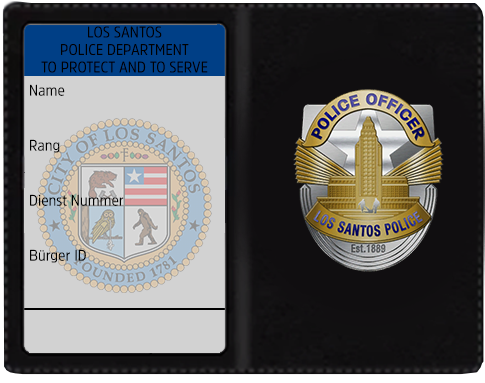
<style>
.page{position:relative;width:485px;height:383px}
.page>*{position:absolute;margin:0}
.t1{font:15.6px/17.4px "AmsiProNarw-Regular";color:#000000}
.t2{font:15.6px/55px "AmsiProNarw-Regular";color:#000000}
</style>
<div class="page">
<p class="t1" style="left:41px;top:26px;width:167px;height:47px;text-align:center">LOS SANTOS<br>POLICE DEPARTMENT<br>TO PROTECT AND TO SERVE</p>
<p class="t2" style="left:30px;top:84px;width:94px;height:179px">Name<br>Rang<br>Dienst Nummer<br>Bürger ID</p>
</div>
